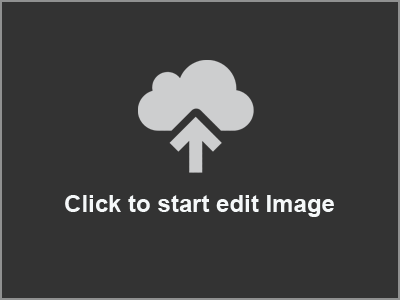
<style>
.page{position:relative;width:400px;height:300px;background:#333333}
.page>*{position:absolute;margin:0}
.t1{font:24px "Arial-BoldMT";color:#f5f8f9}
</style>
<div class="page">
<p class="t1" style="left:65px;top:195px;width:269px;height:22px">Click to start edit Image</p>
</div>
